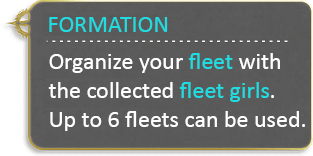
<style>
.page{position:relative;width:313px;height:156px}
.page>*{position:absolute;margin:0}
.t1{font:24px "Calibri";color:#20dbe0}
.t2{font:24px "Calibri";color:#ffffff}
</style>
<div class="page">
<p class="t1" style="left:49px;top:17px;width:119px;height:15px">FORMATION</p>
<p class="t2" style="left:48px;top:53px;width:257px;height:78px">Organize your <span class="t1">fleet</span> with<br>the collected <span class="t1">fleet girls</span>.<br>Up to 6 fleets can be used.</p>
</div>
